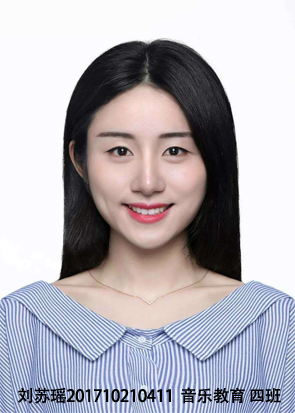
<style>
.page{position:relative;width:295px;height:413px;background:#fcfbff}
.page>*{position:absolute;margin:0}
.t1{font:16.7px "AdobeHeitiStd-Regular";letter-spacing:-0.025em;color:#000000}
</style>
<div class="page">
<p class="t1" style="left:18px;top:387px;width:263px;height:17px">刘苏瑶201710210411  音乐教育 四班</p>
</div>
